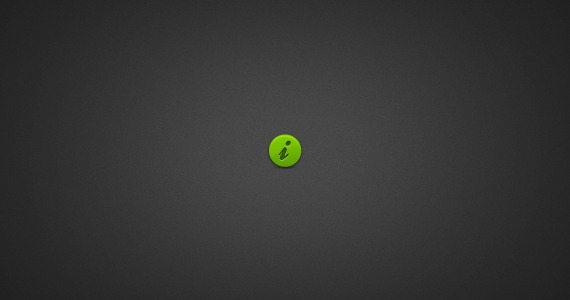
<style>
.page{position:relative;width:570px;height:300px}
.page>*{position:absolute;margin:0}
.t1{font:30px "BallparkWeiner";color:#3c5e04}
</style>
<div class="page">
<p class="t1" style="left:278px;top:140px;width:13px;height:20px">i</p>
</div>
